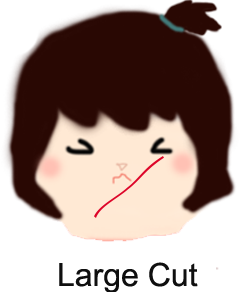
<style>
.page{position:relative;width:240px;height:292px;background:#290803}
.page>*{position:absolute;margin:0}
.t1{font:32px "ArialMT";color:#0f0f0f}
</style>
<div class="page">
<p class="t1" style="left:59px;top:262px;width:139px;height:31px">Large Cut</p>
</div>
